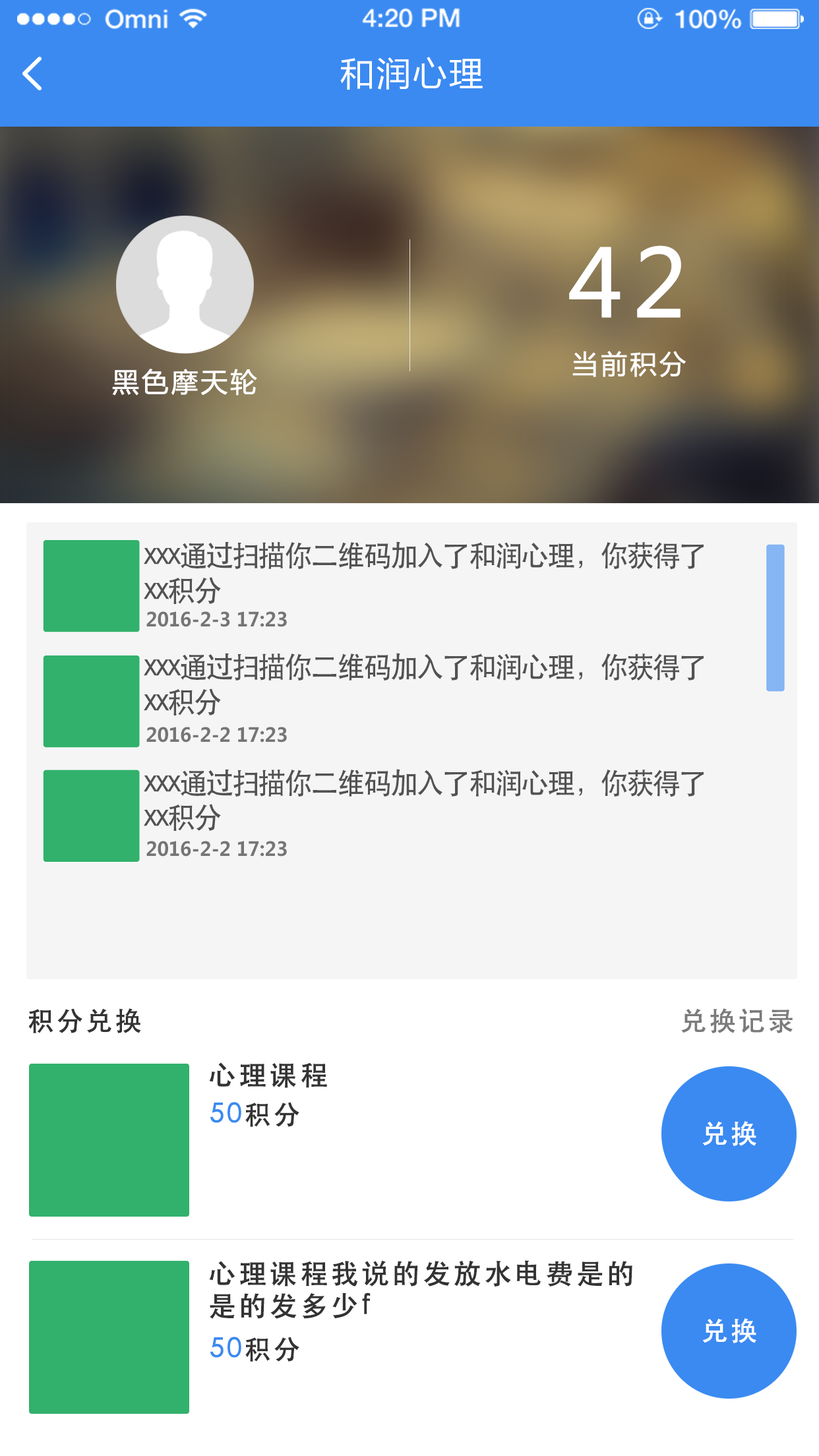
<style>
.page{position:relative;width:819px;height:1456px;background:#ffffff}
.page>*{position:absolute;margin:0}
.t1{font:33.6px "MicrosoftYaHei";letter-spacing:0.08em;color:#ffffff}
.t2{font:92.3px "MicrosoftYaHei";letter-spacing:0.08em;color:#ffffff;font-weight:bold}
.t3{font:26.4px "MicrosoftYaHei";letter-spacing:0.08em;color:#ffffff;font-weight:bold}
.t4{font:26.7px "MicrosoftYaHei";letter-spacing:0.08em;color:#ffffff;font-weight:bold}
.t5{font:29.3px/34.6px "STHeitiSC-Medium";letter-spacing:-0.06em;color:#535252;scale:0.95 1}
.t6{font:19.5px "MicrosoftYaHei-Bold";color:#757575;scale:0.95 1}
.t7{font:26.4px "STHeitiSC-Medium";letter-spacing:0.08em;color:#333333;font-weight:bold}
.t8{font:26.4px "STHeitiSC-Medium";letter-spacing:0.08em;color:#7b7b7b;font-weight:bold}
.t9{font:27.7px "STHeitiSC-Medium";letter-spacing:0.08em;color:#333333;font-weight:bold}
.t10{font:26.4px "STHeitiSC-Medium";letter-spacing:0.08em;color:#3a8af1;font-weight:bold}
.t11{font:26.4px "STHeitiSC-Medium";letter-spacing:0.08em;color:#ffffff;font-weight:bold}
.t12{font:27.7px/32.3px "STHeitiSC-Medium";letter-spacing:0.08em;color:#333333;font-weight:bold}
</style>
<div class="page">
<p class="t1" style="left:340px;top:57px;width:143px;height:33px">和润心理</p>
<p class="t2" style="left:569px;top:245px;width:112px;height:73px">42</p>
<p class="t3" style="left:572px;top:351px;width:114px;height:26px">当前积分</p>
<p class="t4" style="left:112px;top:369px;width:145px;height:27px">黑色摩天轮</p>
<p class="t5" style="left:144px;top:541px;width:560px;height:63px">xxx通过扫描你二维码加入了和润心理，你获得了<br>xx积分</p>
<p class="t6" style="left:146px;top:611px;width:141px;height:16px">2016-2-3 17:23</p>
<p class="t5" style="left:144px;top:653px;width:560px;height:62px">xxx通过扫描你二维码加入了和润心理，你获得了<br>xx积分</p>
<p class="t6" style="left:146px;top:727px;width:141px;height:15px">2016-2-2 17:23</p>
<p class="t5" style="left:144px;top:769px;width:560px;height:62px">xxx通过扫描你二维码加入了和润心理，你获得了<br>xx积分</p>
<p class="t6" style="left:146px;top:841px;width:141px;height:16px">2016-2-2 17:23</p>
<p class="t7" style="left:28px;top:1008px;width:113px;height:25px">积分兑换</p>
<p class="t8" style="left:681px;top:1008px;width:112px;height:25px">兑换记录</p>
<p class="t9" style="left:209px;top:1062px;width:118px;height:26px">心理课程</p>
<p class="t10" style="left:210px;top:1102px;width:89px;height:25px">50<span class="t7">积分</span></p>
<p class="t11" style="left:702px;top:1121px;width:54px;height:25px">兑换</p>
<p class="t12" style="left:209px;top:1260px;width:423px;height:59px">心理课程我说的发放水电费是的<br>是的发多少f</p>
<p class="t11" style="left:702px;top:1318px;width:54px;height:25px">兑换</p>
<p class="t10" style="left:210px;top:1337px;width:89px;height:25px">50<span class="t7">积分</span></p>
</div>
